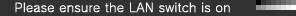
<style>
.page{position:relative;width:296px;height:16px;background:#333333}
.page>*{position:absolute;margin:0}
.t1{font:12px "RodinNTLGPro-M";letter-spacing:0.035em;color:#ffffff}
</style>
<div class="page">
<p class="t1" style="left:15px;top:2px;width:215px;height:11px">Please ensure the LAN switch is on</p>
</div>
